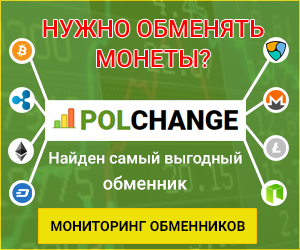
<style>
.page{position:relative;width:300px;height:250px}
.page>*{position:absolute;margin:0}
.t1{font:24px "Roboto-Medium";color:#ff0000}
.t2{font:16px "Roboto-Medium";color:#ffffff}
.t3{font:18px "Roboto-Medium";color:#ffffff}
.t4{font:14px "Roboto-Bold";color:#000000}
</style>
<div class="page">
<p class="t1" style="left:43px;top:19px;width:221px;height:19px">НУЖНО ОБМЕНЯТЬ</p>
<p class="t1" style="left:97px;top:49px;width:113px;height:19px">МОНЕТЫ?</p>
<p class="t2" style="left:49px;top:151px;width:193px;height:15px">Найден самый выгодный</p>
<p class="t3" style="left:103px;top:175px;width:84px;height:15px">обменник</p>
<p class="t4" style="left:51px;top:221px;width:194px;height:11px">МОНИТОРИНГ ОБМЕННИКОВ</p>
</div>
